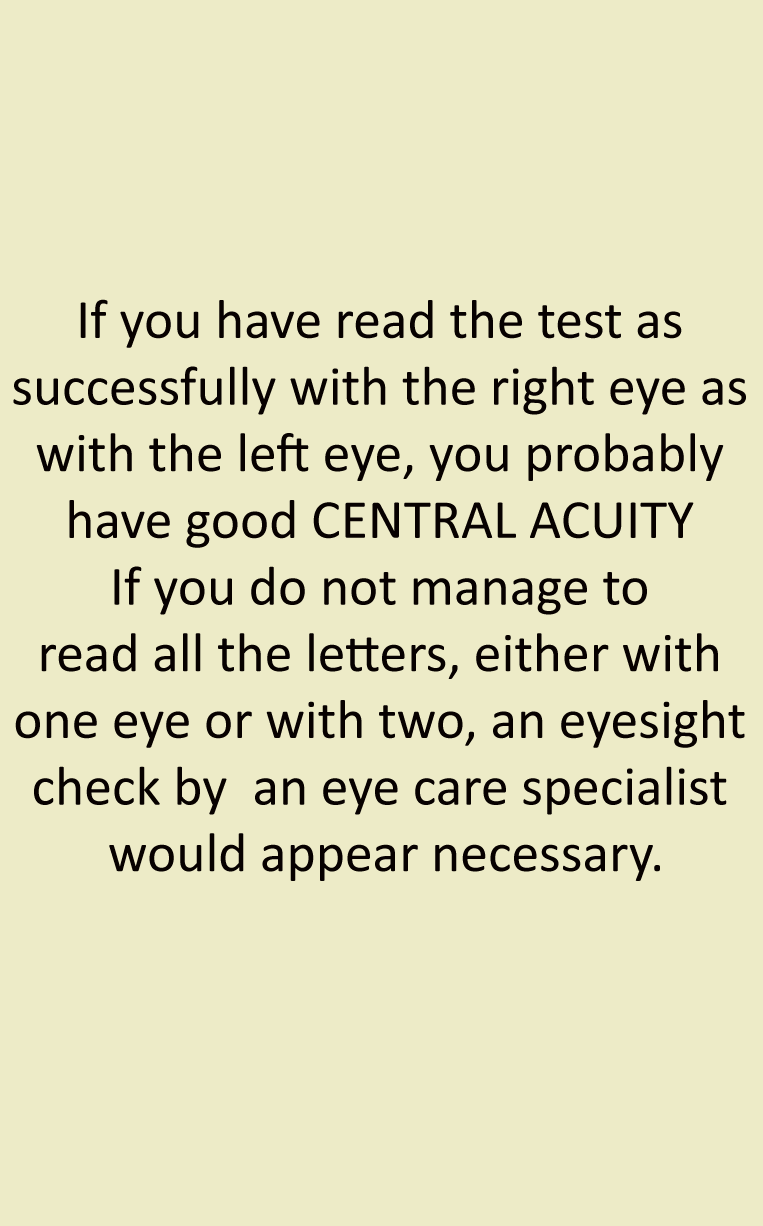
<style>
.page{position:relative;width:763px;height:1226px;background:#edebc7}
.page>*{position:absolute;margin:0}
.t1{font:55.6px "Calibri";color:#070100}
</style>
<div class="page">
<p class="t1" style="left:13px;top:299px;width:733px;height:582px;text-align:center">If you have read the test as <br>successfully with the right eye as <br>with the left eye, you probably <br>have good CENTRAL ACUITY <br>If you do not manage to <br>read all the letters, either with <br>one eye or with two, an eyesight <br>check by  an eye care specialist <br>would appear necessary.</p>
</div>
